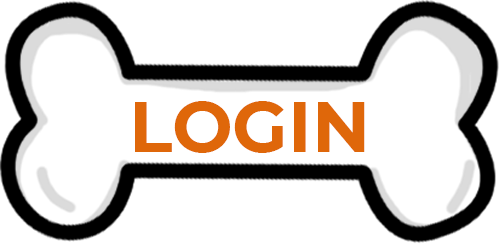
<style>
.page{position:relative;width:500px;height:250px;background:#ffffff}
.page>*{position:absolute;margin:0}
.t1{font:72px "Montserrat-Bold";color:#df670a}
</style>
<div class="page">
<p class="t1" style="left:135px;top:101px;width:230px;height:52px">LOGIN</p>
</div>
